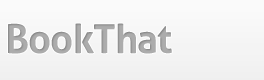
<style>
.page{position:relative;width:264px;height:80px}
.page>*{position:absolute;margin:0}
.t1{font:40px "Aller-Bold";letter-spacing:-0.025em;color:#acacac}
</style>
<div class="page">
<p class="t1" style="left:8px;top:23px;width:164px;height:31px">BookThat</p>
</div>
